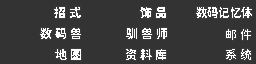
<style>
.page{position:relative;width:256px;height:64px;background:#333333}
.page>*{position:absolute;margin:0}
.t1{font:12px "JiangChengYuanTi-700W";color:#ffffff}
.t2{font:12px "JiangChengYuanTi-600W";color:#ffffff;scale:0.95 1}
.t3{font:12px "JiangChengYuanTi-600W";color:#ffffff}
.t4{font:12px "JiangChengYuanTi-500W";color:#ffffff}
</style>
<div class="page">
<p class="t1" style="left:54px;top:7px;width:27px;height:11px">招 式</p>
<p class="t1" style="left:140px;top:7px;width:26px;height:11px">饰 品</p>
<p class="t2" style="left:196px;top:7px;width:56px;height:11px">数码记忆体</p>
<p class="t3" style="left:40px;top:28px;width:41px;height:11px">数 码 兽</p>
<p class="t3" style="left:126px;top:28px;width:41px;height:11px">驯 兽 师</p>
<p class="t4" style="left:226px;top:29px;width:25px;height:11px">邮 件</p>
<p class="t3" style="left:55px;top:49px;width:26px;height:11px">地 图</p>
<p class="t3" style="left:126px;top:49px;width:40px;height:11px">资 料 库</p>
<p class="t4" style="left:226px;top:49px;width:25px;height:11px">系 统</p>
</div>
